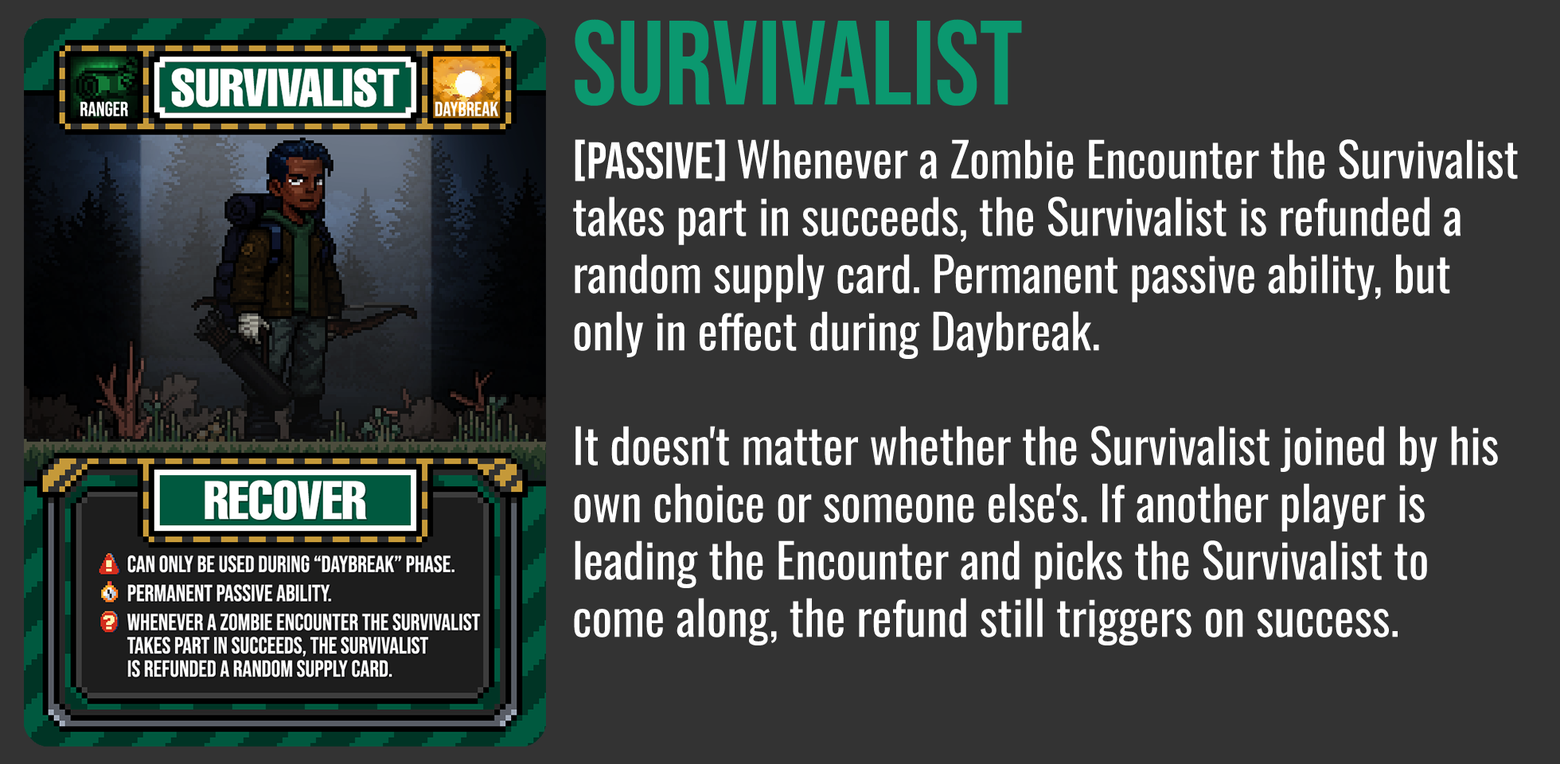
<style>
.page{position:relative;width:1560px;height:764px;background:#333333}
.page>*{position:absolute;margin:0}
.t1{font:119.4px "BebasNeue-Regular";color:#0b986f}
.t2{font:47.8px "Oswald-Regular";color:#ffffff}
.t3{font:51.7px "BebasNeue-Regular";color:#ffffff}
</style>
<div class="page">
<p class="t1" style="left:575px;top:19px;width:447px;height:87px">SURVIVALIST</p>
<p class="t2" style="left:573px;top:139px;width:945px;height:507px"><span class="t3">[PASSIVE] </span>Whenever a Zombie Encounter the Survivalist takes part in succeeds, the Survivalist is refunded a random supply card. Permanent passive ability, but only in effect during Daybreak.<br><br>It doesn't matter whether the Survivalist joined by his own choice or someone else's. If another player is leading the Encounter and picks the Survivalist to come along, the refund still triggers on success.</p>
</div>
